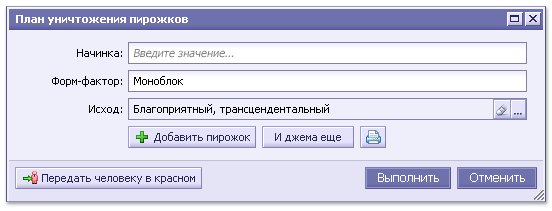
<style>
.page{position:relative;width:552px;height:211px;background:#efeefb}
.page>*{position:absolute;margin:0}
.t1{font:11px "Tahoma-Bold";color:#ffffff}
.t2{font:11px/28px "Tahoma";color:#000000}
.t3{font:11px "Tahoma";color:#7f7f7f;font-style:italic}
.t4{font:11px "Tahoma";letter-spacing:-0.025em;color:#7f7f7f;font-style:italic}
.t5{font:11px "Tahoma";color:#000000}
.t6{font:11px "Tahoma";color:#272751}
.t7{font:12px "Tahoma";color:#ffffff}
</style>
<div class="page">
<p class="t1" style="left:16px;top:15px;width:172px;height:10px">План уничтожения пирожков</p>
<p class="t2" style="left:52px;top:49px;width:70px;height:65px;text-align:right">Начинка:<br>Форм-фактор:<br>Исход:</p>
<p class="t3" style="left:133px;top:49px;width:101px;height:10px">Введите значение<span class="t4">...</span></p>
<p class="t5" style="left:134px;top:76px;width:49px;height:9px">Моноблок</p>
<p class="t5" style="left:134px;top:104px;width:195px;height:11px">Благоприятный, трансцендентальный</p>
<p class="t6" style="left:154px;top:132px;width:96px;height:11px">Добавить пирожок</p>
<p class="t6" style="left:275px;top:133px;width:66px;height:9px">И джема еще</p>
<p class="t6" style="left:42px;top:174px;width:153px;height:10px">Передать человеку в красном</p>
<p class="t7" style="left:378px;top:173px;width:61px;height:9px">Выполнить</p>
<p class="t7" style="left:470px;top:173px;width:55px;height:9px">Отменить</p>
</div>
